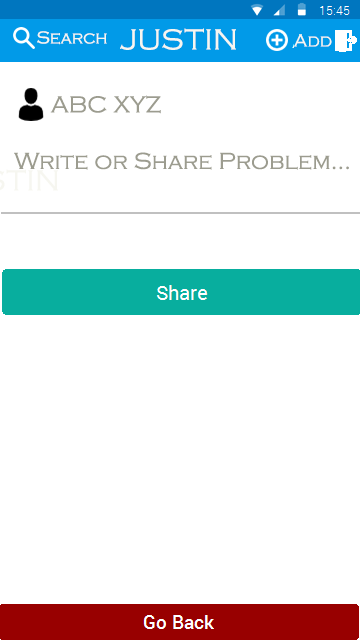
<style>
.page{position:relative;width:360px;height:640px;background:#ffffff}
.page>*{position:absolute;margin:0}
.t1{font:30px "CopperplateGothic-Light";color:#f6f6f0}
.t2{font:18px "CopperplateGothic-Light";color:#f6f6f0}
.t3{font:24px "CopperplateGothic-Light";color:#9c9c8f}
</style>
<div class="page">
<p class="t1" style="left:120px;top:28px;width:116px;height:22px">JUSTIN</p>
<p class="t2" style="left:37px;top:31px;width:70px;height:14px">Search</p>
<p class="t2" style="left:293px;top:34px;width:39px;height:13px">Add</p>
<p class="t3" style="left:50px;top:95px;width:111px;height:19px">ABC XYZ</p>
<p class="t3" style="left:14px;top:152px;width:335px;height:18px">Write or Share Problem...</p>
</div>
